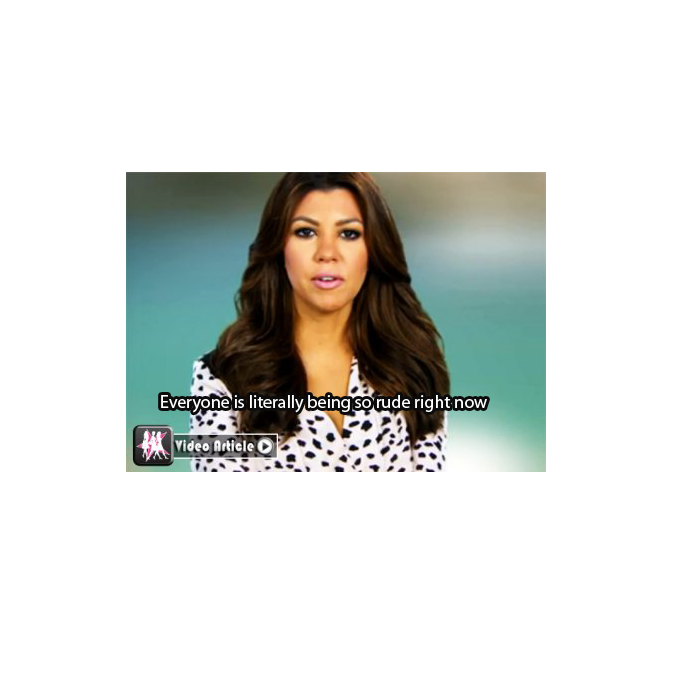
<style>
.page{position:relative;width:700px;height:700px;background:#ffffff}
.page>*{position:absolute;margin:0}
.t1{font:18px "MyriadPro-Regular";color:#ffffff}
</style>
<div class="page">
<p class="t1" style="left:161px;top:395px;width:326px;height:18px">Everyone is literally being so rude right now</p>
</div>
